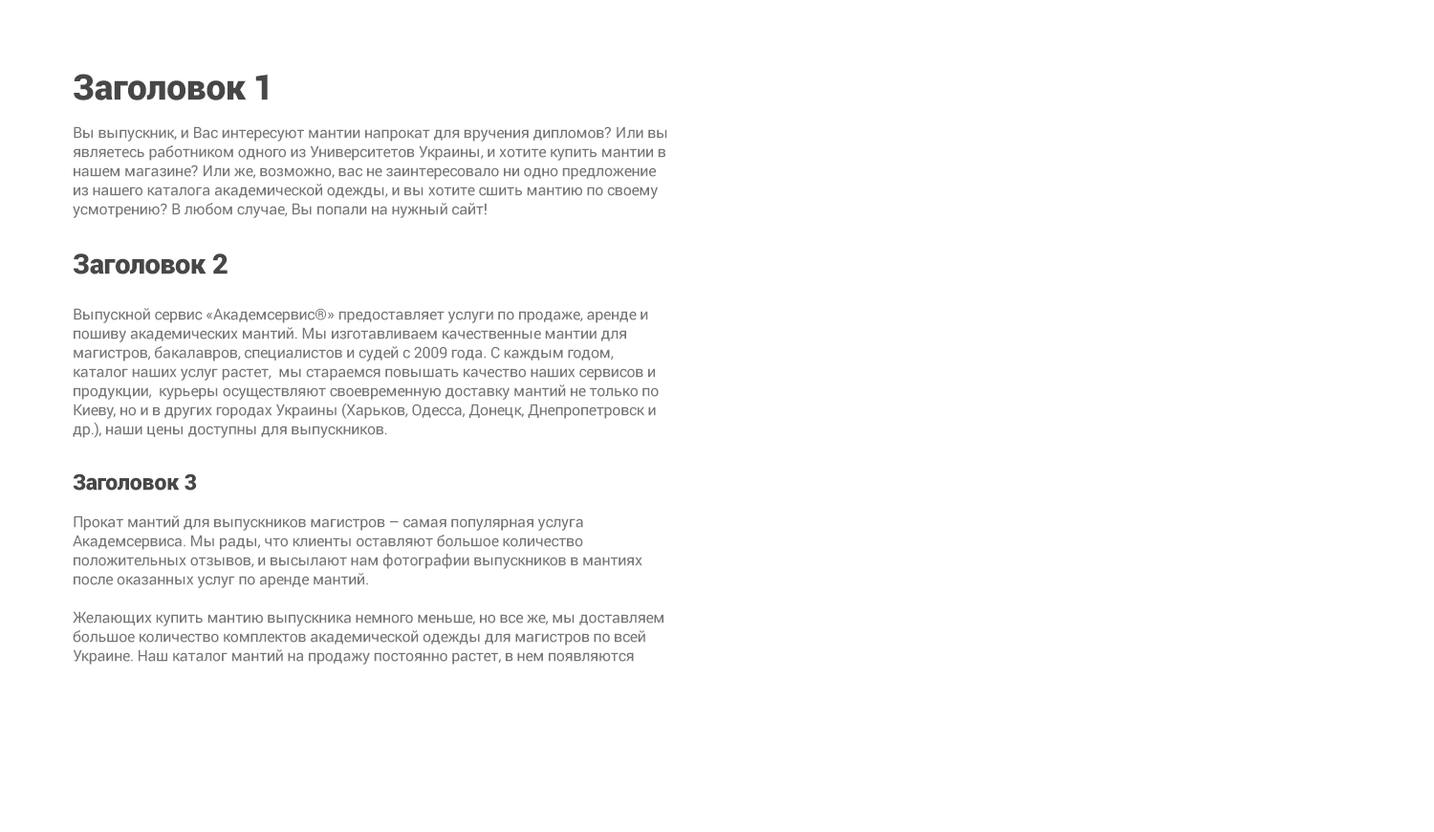
<style>
.page{position:relative;width:1434px;height:832px;background:#ffffff}
.page>*{position:absolute;margin:0}
.t1{font:15.3px/19.1px "Roboto-Regular";letter-spacing:-0.01em;color:#757575}
.t2{font:35.4px/19.1px "Roboto-Black";letter-spacing:-0.01em;color:#474747}
.t3{font:27.7px/22px "Roboto-Black";letter-spacing:-0.01em;color:#474747}
.t4{font:22px/31.5px "Roboto-Black";letter-spacing:-0.01em;color:#474747}
</style>
<div class="page">
<p class="t1" style="left:73px;top:74px;width:594px;height:590px"><span class="t2">Заголовок 1<br></span>Вы выпускник, и Вас интересуют мантии напрокат для вручения дипломов? Или вы являетесь работником одного из Университетов Украины, и хотите купить мантии в нашем магазине? Или же, возможно, вас не заинтересовало ни одно предложение из нашего каталога академической одежды, и вы хотите сшить мантию по своему усмотрению? В любом случае, Вы попали на нужный сайт!<br><span class="t3">Заголовок 2<br></span>Выпускной сервис «Академсервис®» предоставляет услуги по продаже, аренде и пошиву академических мантий. Мы изготавливаем качественные мантии для магистров, бакалавров, специалистов и судей с 2009 года. С каждым годом, каталог наших услуг растет,  мы стараемся повышать качество наших сервисов и продукции,  курьеры осуществляют своевременную доставку мантий не только по Киеву, но и в других городах Украины (Харьков, Одесса, Донецк, Днепропетровск и др.), наши цены доступны для выпускников.<br><span class="t4">Заголовок 3<br></span>Прокат мантий для выпускников магистров – самая популярная услуга Академсервиса. Мы рады, что клиенты оставляют большое количество положительных отзывов, и высылают нам фотографии выпускников в мантиях после оказанных услуг по аренде мантий.<br>Желающих купить мантию выпускника немного меньше, но все же, мы доставляем большое количество комплектов академической одежды для магистров по всей Украине. Наш каталог мантий на продажу постоянно растет, в нем появляются новые модели и цвета (мы изготавливаем не только черные мантии).<br>Стандартный комплект нашей академической одежды состоит из черной мантии, красного воротника магистра (есть и другие) и конфедератки (шапки-бонета). Однако наш сервис готов сшить мантии практически любого цвета и фасона – давайте обсуждать.<br>Оформить заказ у наших менеджеров очень легко, в не зависимости от типа услуги, будь то аренда мантий магистра, пошив мантии для выпускника или желание купить мантию для себя. Все что вам нужно – ознакомиться с основной информацией об услугах, ценах и скидках, а потом позвонить одному из наших менеджеров. Работники нашего Академсервиса подберут для вас самые выгодные условия.<br>Воспоминания — это волшебные наряды, которые всегда остаются в моде! Так что, вы готовы оформить заказ?</p>
</div>
